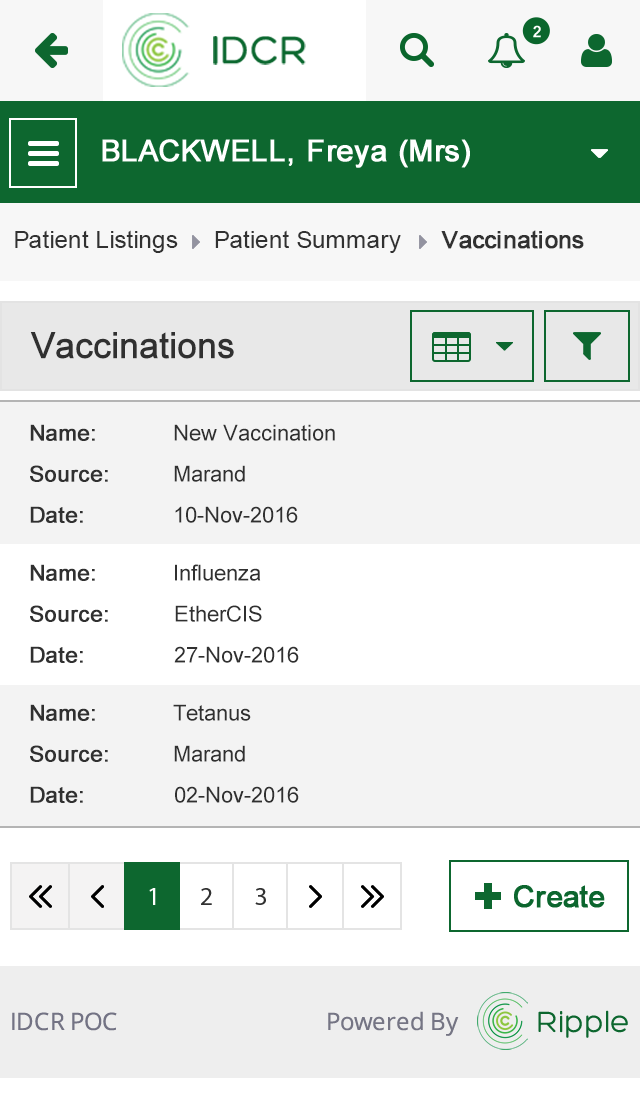
<style>
.page{position:relative;width:640px;height:1108px;background:#ffffff}
.page>*{position:absolute;margin:0}
.t1{font:24px "ArialMT";color:#313131}
.t2{font:24px "ArialMT";color:#313131;font-weight:bold}
.t3{font:36px "ArialMT";color:#303030;font-weight:bold}
.t4{font:22px "ArialMT";color:#303030;font-weight:bold}
.t5{font:22px "ArialMT";color:#303030}
</style>
<div class="page">
<p class="t1" style="left:15px;top:230px;width:163px;height:23px">Patient Listings</p>
<p class="t1" style="left:215px;top:230px;width:186px;height:23px">Patient Summary</p>
<p class="t2" style="left:441px;top:230px;width:143px;height:19px">Vaccinations</p>
<p class="t3" style="left:30px;top:332px;width:204px;height:27px">Vaccinations</p>
<p class="t4" style="left:30px;top:424px;width:65px;height:17px">Name:</p>
<p class="t5" style="left:174px;top:424px;width:161px;height:17px">New Vaccination</p>
<p class="t4" style="left:30px;top:465px;width:78px;height:17px">Source:</p>
<p class="t5" style="left:174px;top:465px;width:71px;height:17px">Marand</p>
<p class="t4" style="left:30px;top:506px;width:53px;height:17px">Date:</p>
<p class="t5" style="left:175px;top:506px;width:123px;height:17px">10-Nov-2016</p>
<p class="t4" style="left:30px;top:564px;width:65px;height:17px">Name:</p>
<p class="t5" style="left:175px;top:564px;width:86px;height:17px">Influenza</p>
<p class="t4" style="left:30px;top:605px;width:78px;height:17px">Source:</p>
<p class="t5" style="left:175px;top:605px;width:87px;height:17px">EtherCIS</p>
<p class="t4" style="left:30px;top:646px;width:53px;height:17px">Date:</p>
<p class="t5" style="left:174px;top:646px;width:125px;height:17px">27-Nov-2016</p>
<p class="t4" style="left:30px;top:704px;width:65px;height:17px">Name:</p>
<p class="t5" style="left:173px;top:704px;width:78px;height:17px">Tetanus</p>
<p class="t4" style="left:30px;top:745px;width:78px;height:17px">Source:</p>
<p class="t5" style="left:174px;top:745px;width:71px;height:17px">Marand</p>
<p class="t4" style="left:30px;top:786px;width:53px;height:17px">Date:</p>
<p class="t5" style="left:175px;top:786px;width:124px;height:17px">02-Nov-2016</p>
</div>
